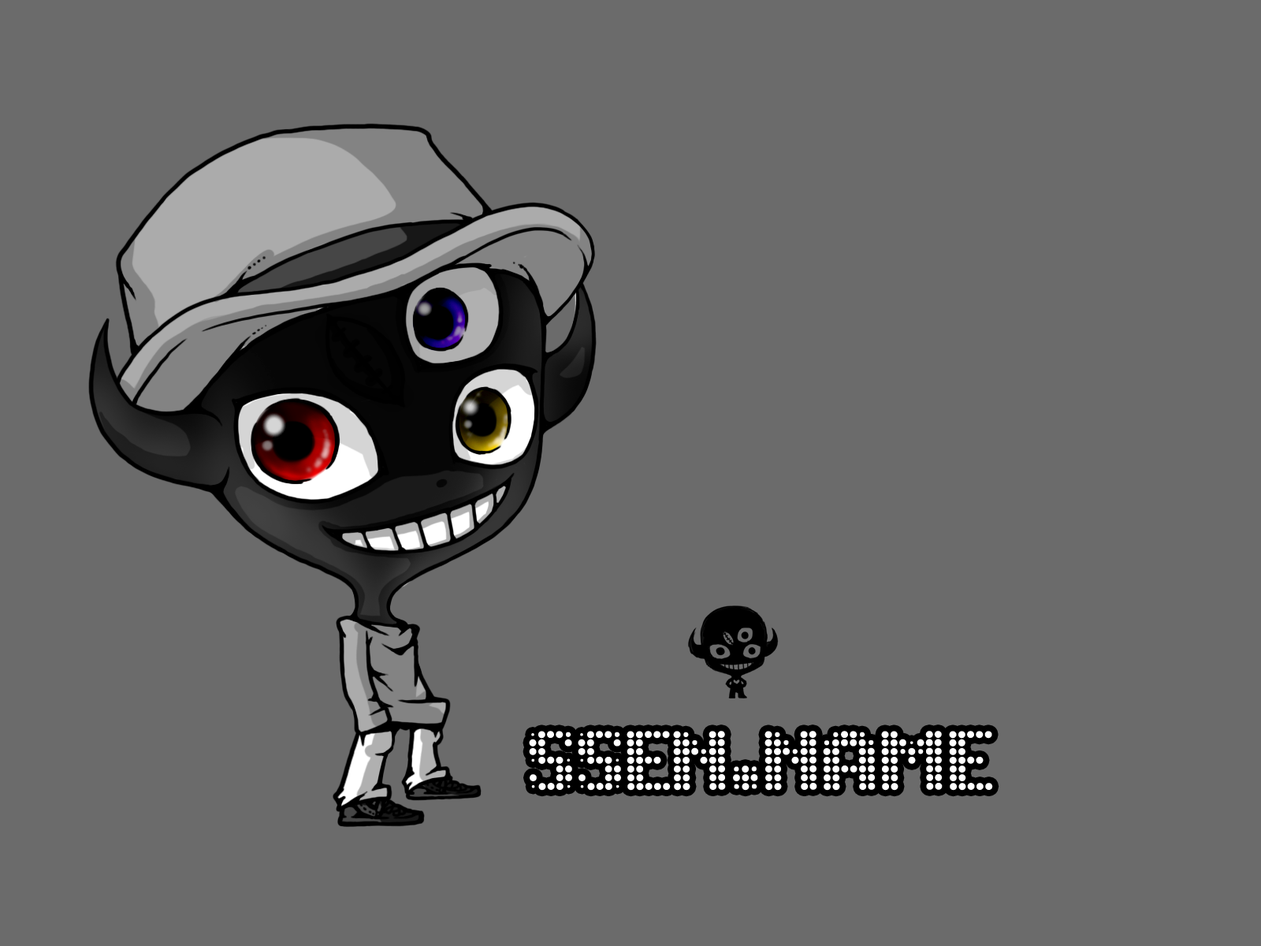
<style>
.page{position:relative;width:1261px;height:946px;background:#6b6b6b}
.page>*{position:absolute;margin:0}
.t1{font:77px "PROGBOT";letter-spacing:-0.075em;color:#ffffff}
</style>
<div class="page">
<p class="t1" style="left:529px;top:731px;width:464px;height:59px">SSEN.NAME</p>
</div>
